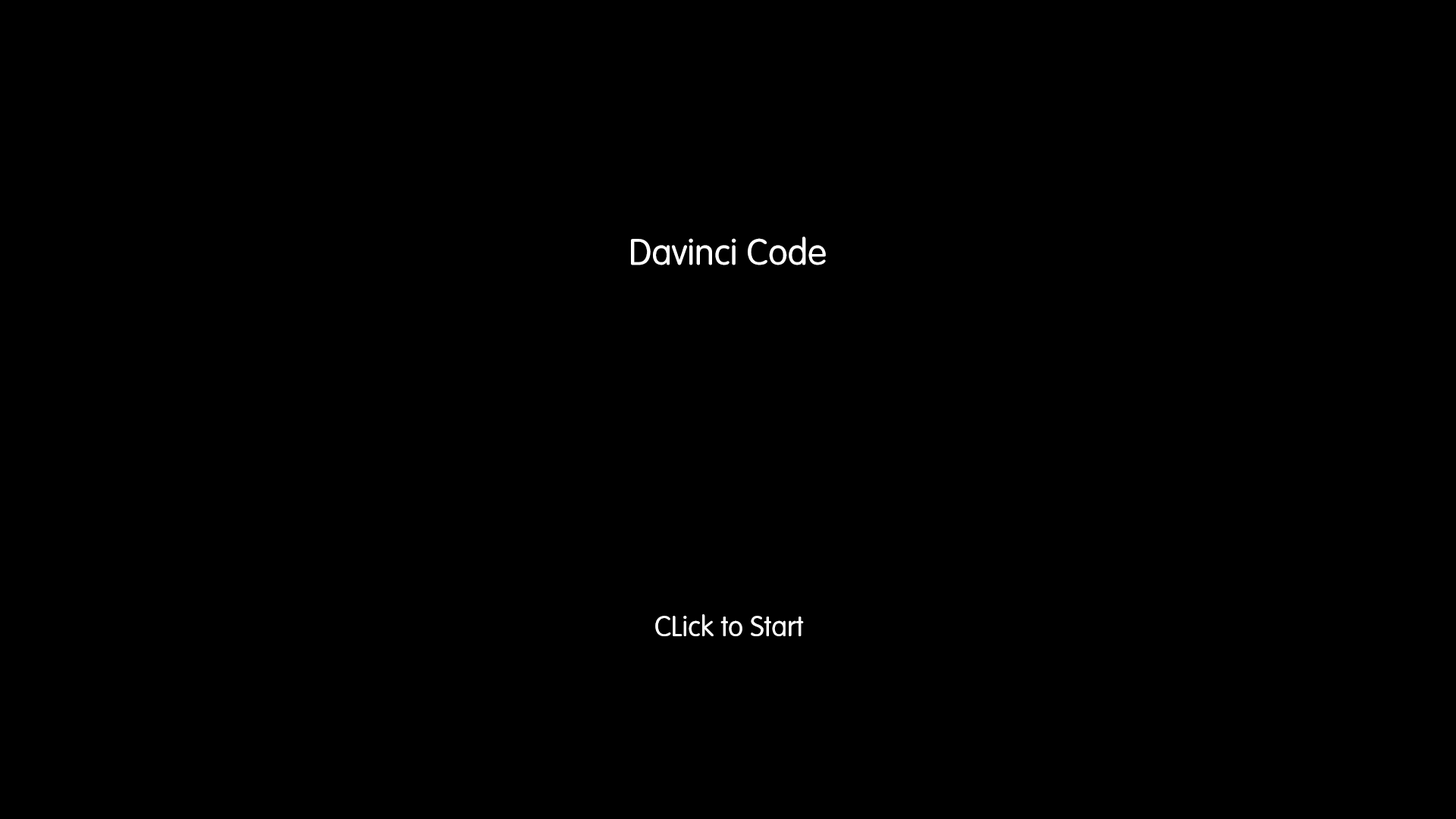
<style>
.page{position:relative;width:1456px;height:819px;background:#000000}
.page>*{position:absolute;margin:0}
.t1{font:36.4px "FZY3K--GBK1-0";color:#ffffff}
.t2{font:28.4px "FZY3K--GBK1-0";color:#fefefe}
</style>
<div class="page">
<p class="t1" style="left:631px;top:237px;width:195px;height:28px">Davinci Code</p>
<p class="t2" style="left:655px;top:614px;width:149px;height:22px">CLick to Start</p>
</div>
